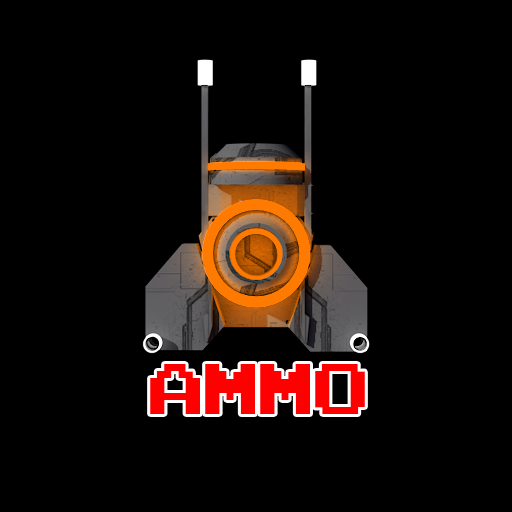
<style>
.page{position:relative;width:512px;height:512px;background:#000000}
.page>*{position:absolute;margin:0}
.t1{font:100px "ArcadeClassic";color:#ff0000}
</style>
<div class="page">
<p class="t1" style="left:150px;top:364px;width:215px;height:50px">Ammo</p>
</div>
